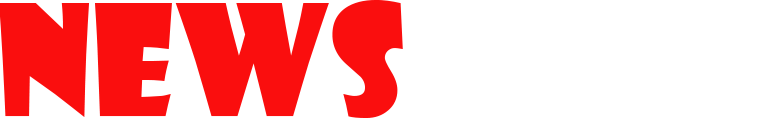
<style>
.page{position:relative;width:771px;height:119px;background:#ffffff}
.page>*{position:absolute;margin:0}
.t1{font:150px "ShowcardGothic-Reg";color:#fa0e0e}
.t2{font:150px "ShowcardGothic-Reg";color:#ffffff}
</style>
<div class="page">
<p class="t1" style="left:0px;top:0px;width:771px;height:119px">News <span class="t2">Web</span></p>
</div>
